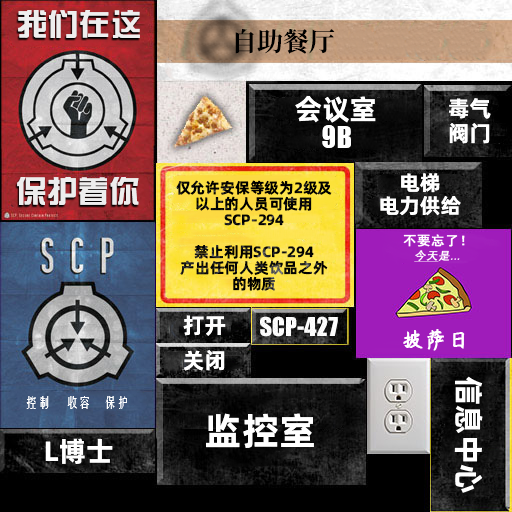
<style>
.page{position:relative;width:512px;height:512px}
.page>*{position:absolute;margin:0}
.t1{font:31px "BDZYJT--GB1-0";color:#eeeeee}
.t2{font:26px "ContainmentBreach-Bold";color:#000000}
.t3{font:28px/25px "AlibabaPuHuiTiB";color:#ffffff}
.t4{font:33px/25px "URWImpactW01-Bold";color:#ffffff}
.t5{font:22px/25px "AlibabaPuHuiTiB";color:#ffffff}
.t6{font:21px/23px "AlibabaPuHuiTiB";color:#ffffff}
.t7{font:31px "BDZYJT--GB1-0";color:#ededed}
.t8{font:15px/16px "AlibabaPuHuiTiB";color:#000000}
.t9{font:13px "SimHei";color:#ffffff;font-weight:bold}
.t10{font:11px "DengXian";color:#ffffff;font-weight:bold;font-style:italic}
.t11{font:11px "DengXian";color:#ffffff;font-weight:bold;font-style:italic;text-decoration:underline}
.t12{font:22px "AlibabaPuHuiTiB";color:#ffffff}
.t13{font:22px "YRDZST-Medium";color:#ffffff;font-weight:bold}
.t14{font:30px "AlibabaPuHuiTiB";color:#ffffff}
.t15{font:13px "FZYTK--GBK1-0";color:#ffffff}
.t16{font:38px "AlibabaPuHuiTiB";color:#ffffff}
.t17{font:28px "AlibabaPuHuiTiB";color:#ffffff}
</style>
<div class="page">
<p class="t1" style="left:18px;top:10px;width:122px;height:28px">我们在这</p>
<p class="t2" style="left:235px;top:29px;width:100px;height:25px">自助餐厅</p>
<p class="t3" style="left:295px;top:96px;width:81px;height:52px;text-align:center">会议室<br><span class="t4">9B</span></p>
<p class="t5" style="left:449px;top:98px;width:42px;height:46px;text-align:center">毒气<br>阀门</p>
<p class="t6" style="left:380px;top:173px;width:81px;height:43px;text-align:center">电梯<br>电力供给</p>
<p class="t7" style="left:17px;top:177px;width:122px;height:28px">保护着你</p>
<p class="t8" style="left:176px;top:180px;width:156px;height:111px;text-align:center">仅允许安保等级为2级及<br>以上的人员可使用<br>SCP-294<br><br>禁止利用SCP-294<br>产出任何人类饮品之外<br>的物质</p>
<p class="t9" style="left:403px;top:234px;width:62px;height:13px">不要忘了！</p>
<p class="t10" style="left:414px;top:250px;width:46px;height:12px"><span class="t11">今天</span>是...</p>
<p class="t12" style="left:183px;top:315px;width:43px;height:21px">打开</p>
<p class="t13" style="left:403px;top:329px;width:62px;height:22px">披萨日</p>
<p class="t12" style="left:183px;top:350px;width:42px;height:21px">关闭</p>
<p class="t14" style="left:454px;top:376px;width:29px;height:117px;rotate:90deg">信息中心</p>
<p class="t15" style="left:26px;top:396px;width:101px;height:13px">控制     收容    保护</p>
<p class="t16" style="left:206px;top:413px;width:108px;height:35px">监控室</p>
<p class="t17" style="left:45px;top:438px;width:68px;height:26px">L博士</p>
</div>
